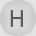
<style>
.page{position:relative;width:36px;height:36px}
.page>*{position:absolute;margin:0}
.t1{font:24px "MyriadPro-Regular";color:#5d5b5b}
</style>
<div class="page">
<p class="t1" style="left:10px;top:10px;width:13px;height:17px;rotate:180deg">H</p>
</div>
